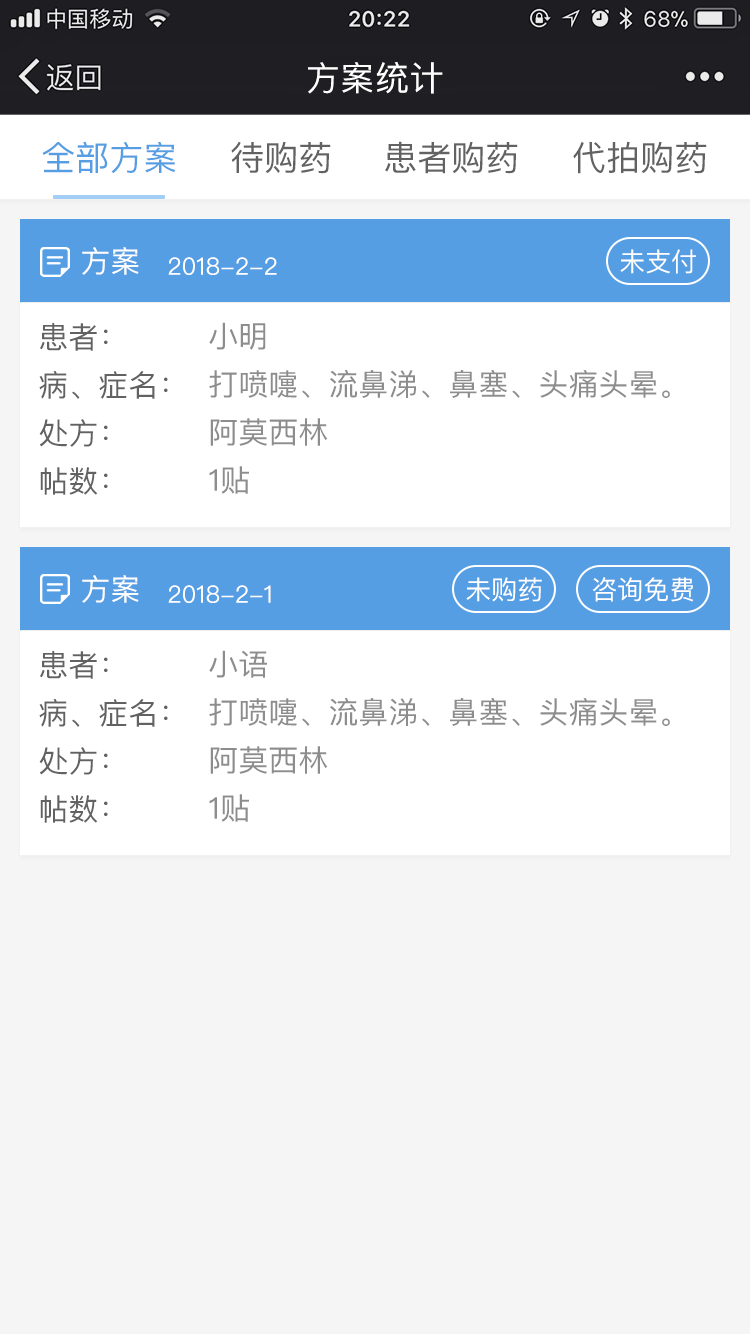
<style>
.page{position:relative;width:750px;height:1334px;background:#f5f5f5}
.page>*{position:absolute;margin:0}
.t1{font:34px "PingFangSC-Regular";letter-spacing:0.02em;color:#ffffff}
.t2{font:34px "PingFangSC-Regular";color:#569ee3}
.t3{font:34px "PingFangSC-Regular";color:#626262}
.t4{font:30px "PingFangSC-Regular";color:#ffffff}
.t5{font:24px "PingFangSC-Regular";color:#ffffff}
.t6{font:26px "PingFangSC-Regular";color:#ffffff}
.t7{font:30px/48px "PingFangSC-Regular";color:#626262}
.t8{font:30px/48px "PingFangSC-Regular";color:#8d8d8d}
</style>
<div class="page">
<p class="t1" style="left:308px;top:62px;width:135px;height:32px">方案统计</p>
<p class="t2" style="left:42px;top:141px;width:134px;height:33px">全部方案</p>
<p class="t3" style="left:231px;top:141px;width:100px;height:33px">待购药</p>
<p class="t3" style="left:385px;top:141px;width:133px;height:33px">患者购药</p>
<p class="t3" style="left:573px;top:141px;width:134px;height:33px">代拍购药</p>
<p class="t4" style="left:82px;top:247px;width:57px;height:28px">方案</p>
<p class="t5" style="left:168px;top:257px;width:109px;height:18px">2018-2-2</p>
<p class="t6" style="left:620px;top:249px;width:76px;height:25px">未支付</p>
<p class="t7" style="left:39px;top:323px;width:129px;height:172px">患者：<br>病、症名：<br>处方：<br>帖数：</p>
<p class="t8" style="left:209px;top:322px;width:461px;height:172px">小明<br>打喷嚏、流鼻涕、鼻塞、头痛头晕。<br>阿莫西林<br>1贴</p>
<p class="t4" style="left:82px;top:575px;width:57px;height:28px">方案</p>
<p class="t6" style="left:466px;top:577px;width:76px;height:25px">未购药</p>
<p class="t6" style="left:592px;top:577px;width:102px;height:25px">咨询免费</p>
<p class="t5" style="left:168px;top:585px;width:103px;height:18px">2018-2-1</p>
<p class="t7" style="left:39px;top:651px;width:129px;height:172px">患者：<br>病、症名：<br>处方：<br>帖数：</p>
<p class="t8" style="left:209px;top:650px;width:461px;height:172px">小语<br>打喷嚏、流鼻涕、鼻塞、头痛头晕。<br>阿莫西林<br>1贴</p>
</div>
